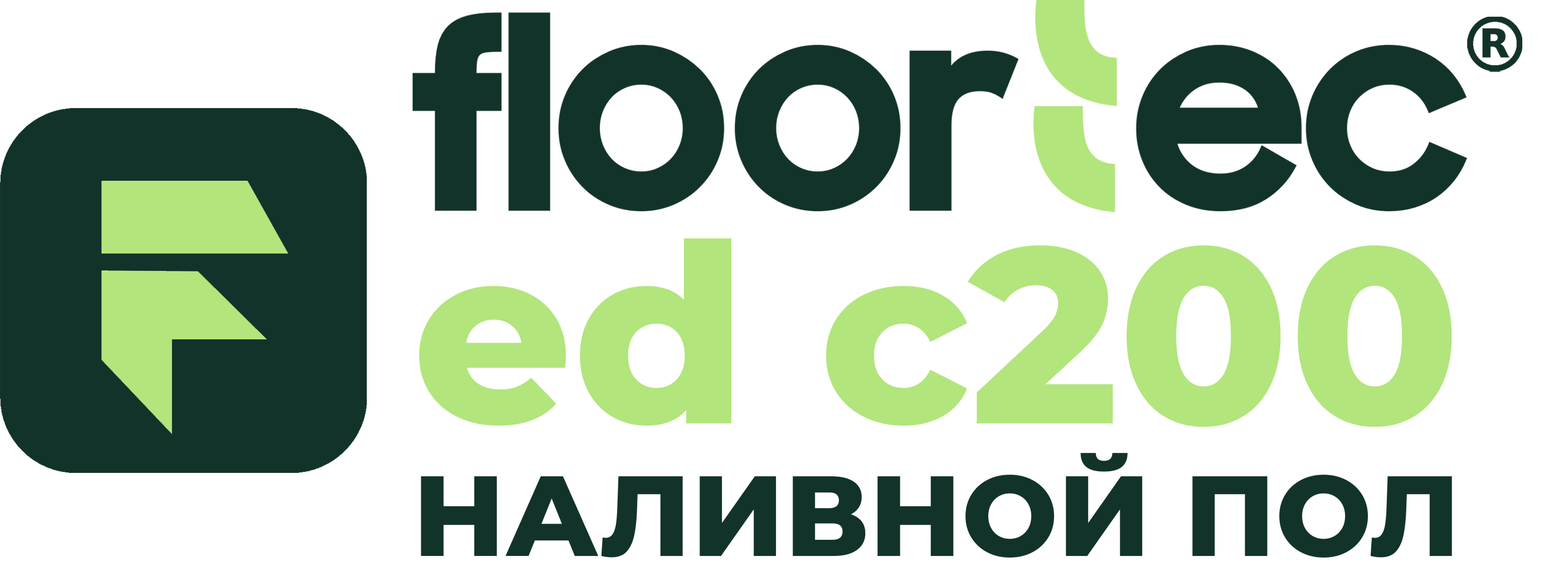
<style>
.page{position:relative;width:1568px;height:581px;background:#ffffff}
.page>*{position:absolute;margin:0}
.t1{font:249.4px "Montserrat-ExtraBold";color:#b2e57c}
.t2{font:113.8px "Montserrat-ExtraBold";color:#12332a;text-transform:uppercase}
</style>
<div class="page">
<p class="t1" style="left:419px;top:238px;width:1033px;height:190px">ed c200</p>
<p class="t2" style="left:421px;top:453px;width:1031px;height:105px">наливной пол</p>
</div>
